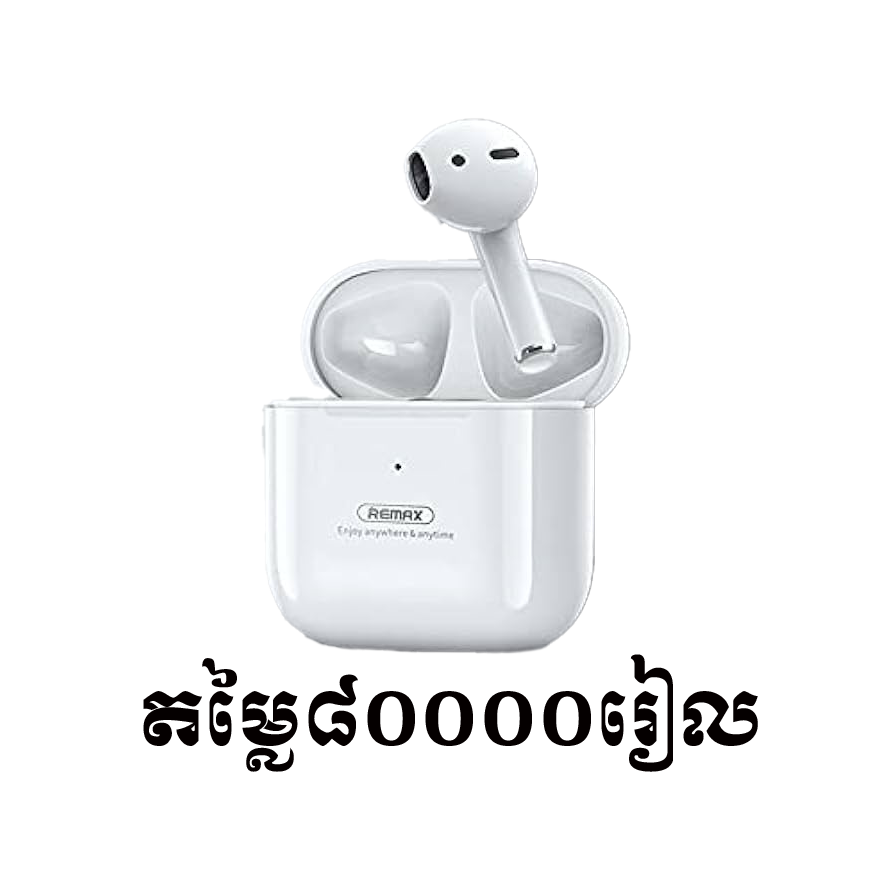
<style>
.page{position:relative;width:894px;height:894px;background:#ffffff}
.page>*{position:absolute;margin:0}
.t1{font:75px "Moul-Regular";color:#050000;text-transform:uppercase}
</style>
<div class="page">
<p class="t1" style="left:143px;top:654px;width:615px;height:118px">តម្លៃ៨០០០០រៀល</p>
</div>
